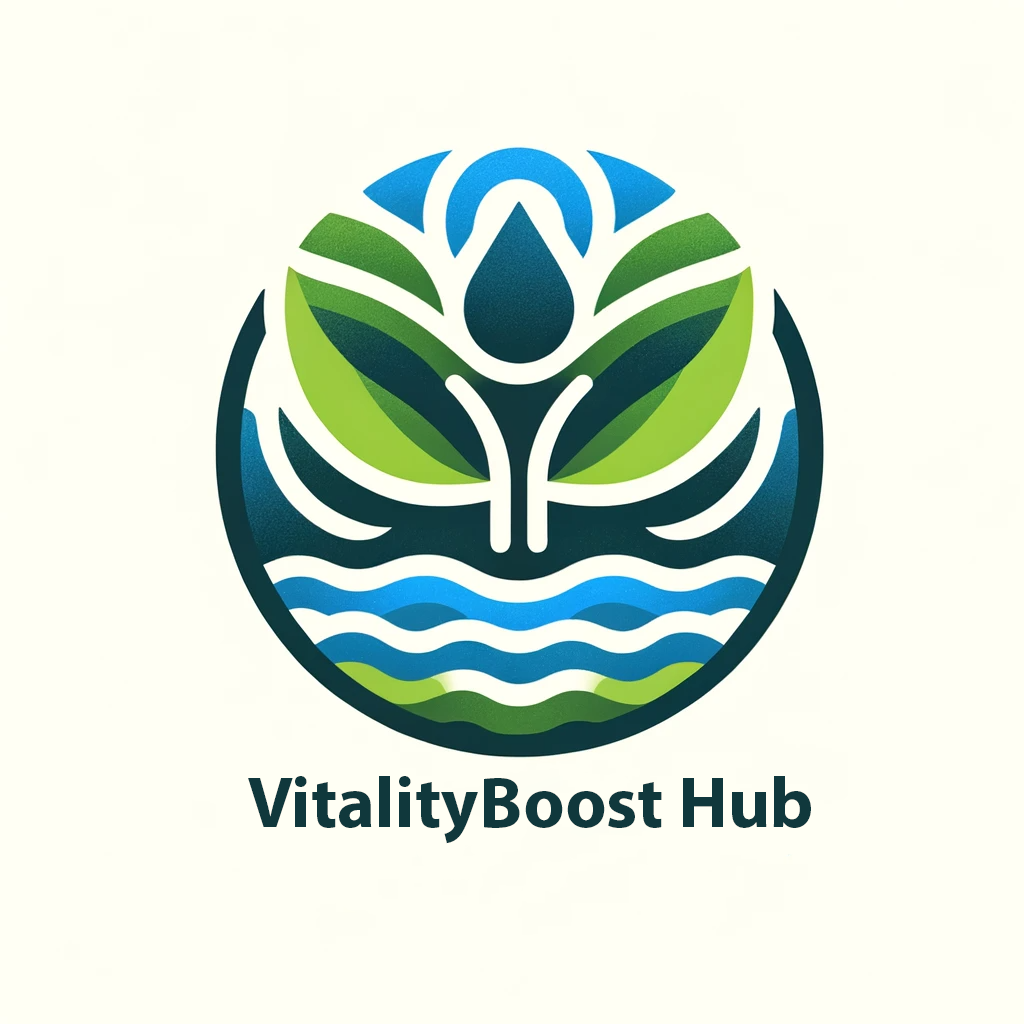
<style>
.page{position:relative;width:1024px;height:1024px;background:#fffff4}
.page>*{position:absolute;margin:0}
.t1{font:72px "MyriadPro-Bold";color:#10383c}
</style>
<div class="page">
<p class="t1" style="left:248px;top:776px;width:563px;height:68px">VitalityBoost Hub</p>
</div>
